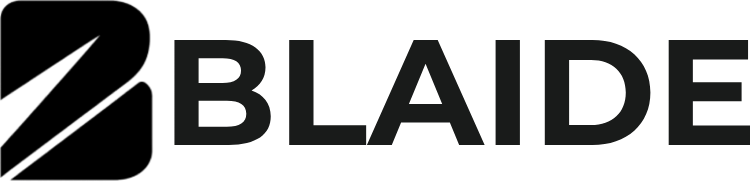
<style>
.page{position:relative;width:750px;height:182px;background:#ffffff}
.page>*{position:absolute;margin:0}
.t1{font:150px "Montserrat-Bold";color:#191b1a}
</style>
<div class="page">
<p class="t1" style="left:174px;top:40px;width:576px;height:105px">BLAIDE</p>
</div>
